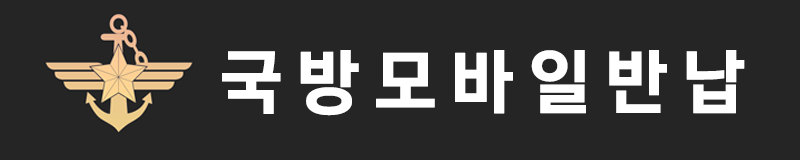
<style>
.page{position:relative;width:800px;height:160px;background:#252525}
.page>*{position:absolute;margin:0}
.t1{font:70px "NEXONLv2GothicBold";letter-spacing:0.2em;color:#ffffff;font-weight:bold}
</style>
<div class="page">
<p class="t1" style="left:222px;top:50px;width:523px;height:66px">국방모바일반납</p>
</div>
